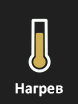
<style>
.page{position:relative;width:78px;height:104px;background:#202020}
.page>*{position:absolute;margin:0}
.t1{font:12px "Calibri-Bold";color:#ffffff}
</style>
<div class="page">
<p class="t1" style="left:15px;top:83px;width:48px;height:14px">Нагрев</p>
</div>
